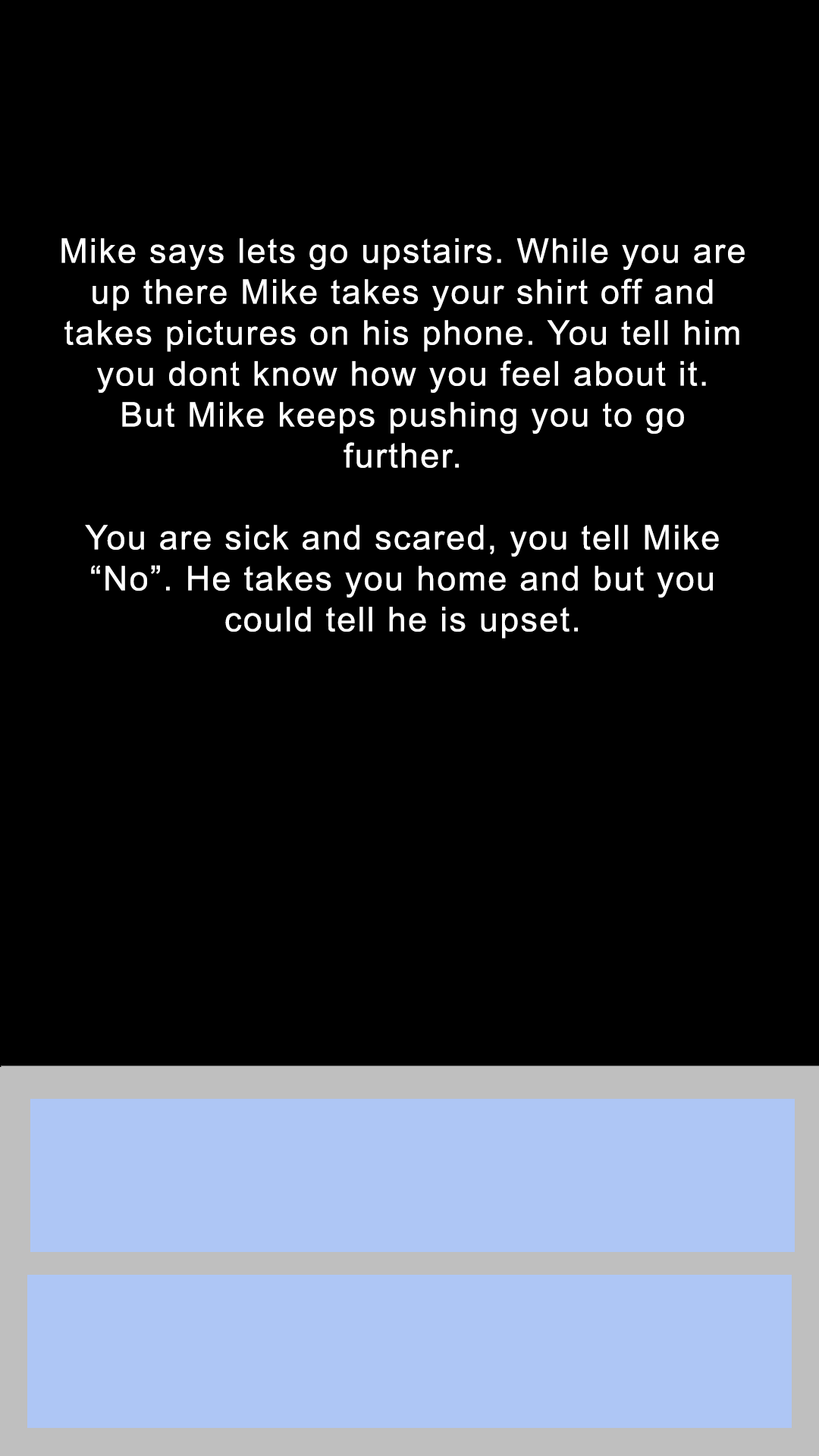
<style>
.page{position:relative;width:819px;height:1456px;background:#000000}
.page>*{position:absolute;margin:0}
.t1{font:34.1px "ArialMT";letter-spacing:0.05em;color:#ffffff}
</style>
<div class="page">
<p class="t1" style="left:61px;top:238px;width:684px;height:401px;text-align:center">Mike says lets go upstairs. While you are up there Mike takes your shirt off and takes pictures on his phone. You tell him you dont know how you feel about it.  But Mike keeps pushing you to go<br>further. <br><br>You are sick and scared, you tell Mike “No”. He takes you home and but you could tell he is upset.</p>
</div>
